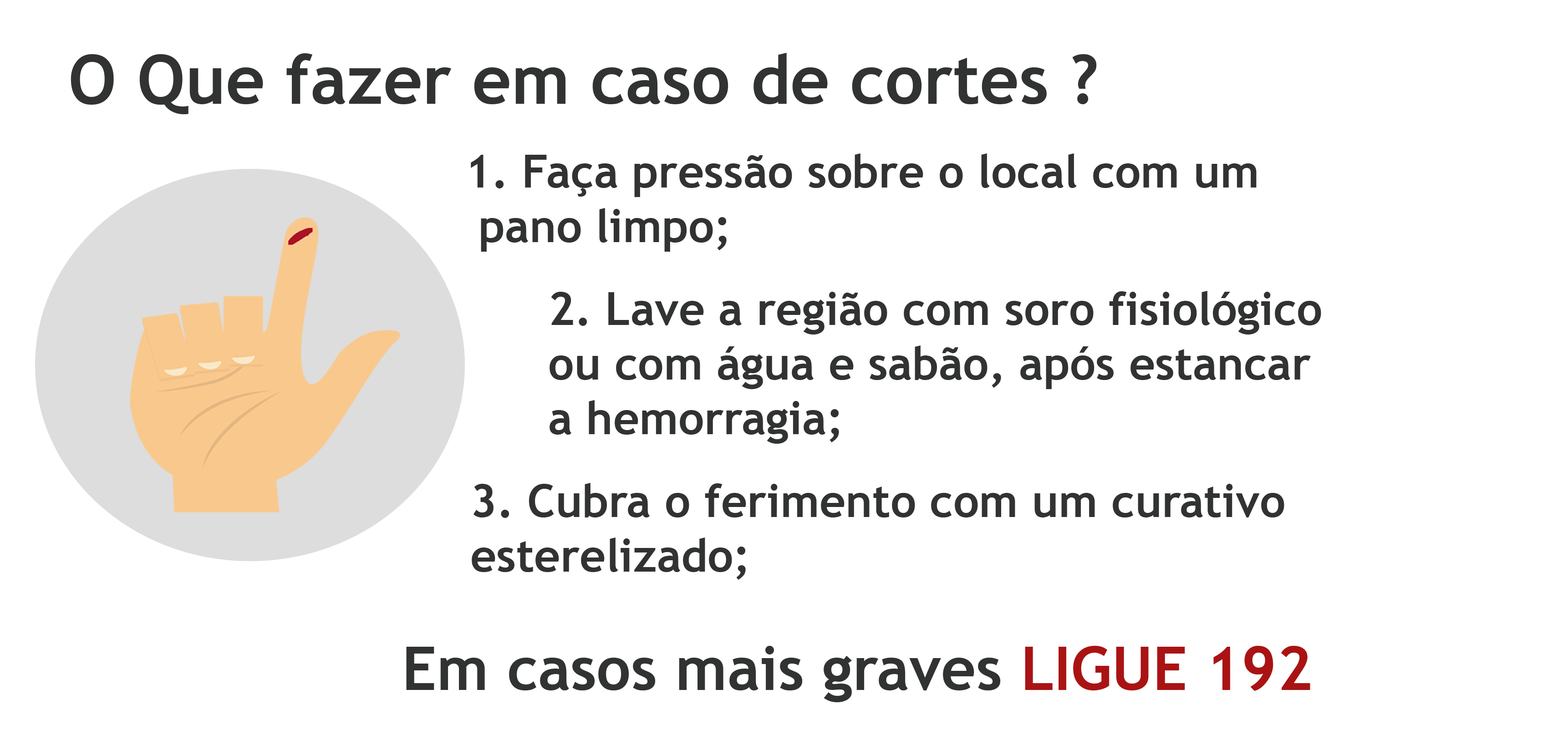
<style>
.page{position:relative;width:1568px;height:730px;background:#ffffff}
.page>*{position:absolute;margin:0}
.t1{font:68.3px "TrebuchetMS-Bold";color:#313232}
.t2{font:45.5px "TrebuchetMS-Bold";color:#313232}
.t3{font:60.7px "TrebuchetMS-Bold";color:#313232}
.t4{font:60.7px "TrebuchetMS-Bold";color:#aa1313}
</style>
<div class="page">
<p class="t1" style="left:71px;top:53px;width:1026px;height:61px">O Que fazer em caso de cortes ?</p>
<p class="t2" style="left:471px;top:153px;width:786px;height:99px">1. Faça pressão sobre o local com um<br> pano limpo;</p>
<p class="t2" style="left:550px;top:291px;width:771px;height:153px">2. Lave a região com soro fisiológico<br>ou com água e sabão, após estancar<br>a hemorragia;</p>
<p class="t2" style="left:472px;top:483px;width:812px;height:97px">3. Cubra o ferimento com um curativo<br>esterelizado;</p>
<p class="t3" style="left:406px;top:646px;width:904px;height:57px">Em casos mais graves<span class="t4"> LIGUE 192</span></p>
</div>
